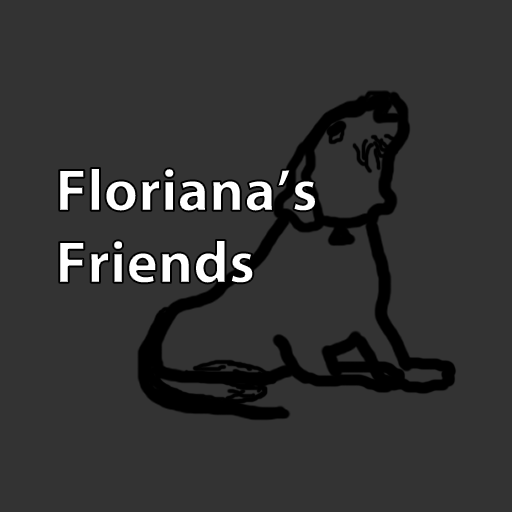
<style>
.page{position:relative;width:512px;height:512px;background:#333333}
.page>*{position:absolute;margin:0}
.t1{font:60px "MyriadPro-Bold";color:#ffffff}
</style>
<div class="page">
<p class="t1" style="left:59px;top:168px;width:257px;height:116px">Floriana’s <br>Friends</p>
</div>
